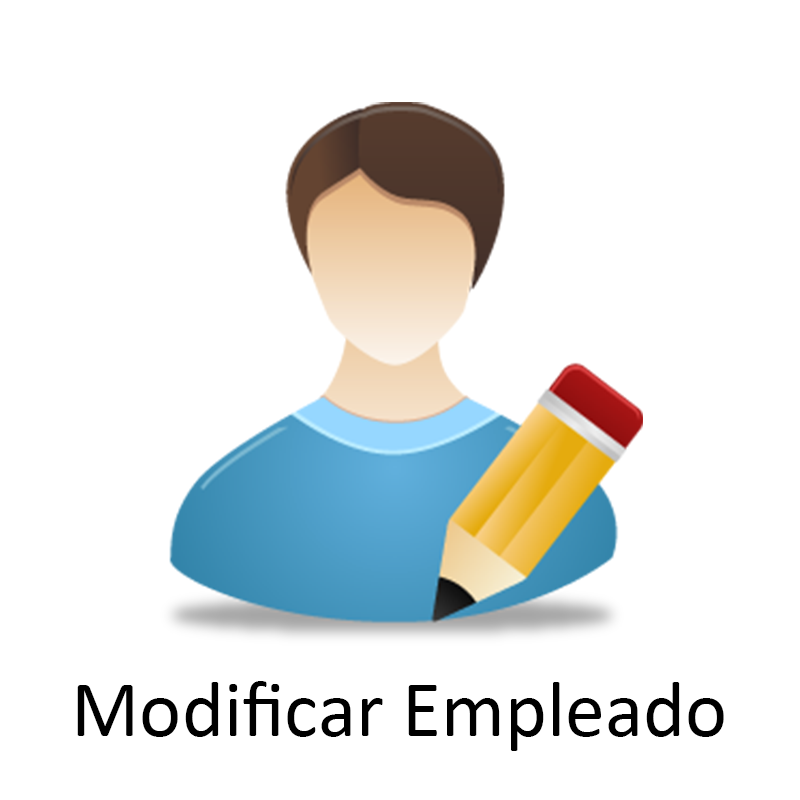
<style>
.page{position:relative;width:800px;height:800px;background:#ffffff}
.page>*{position:absolute;margin:0}
.t1{font:80px "Calibri";color:#000000}
</style>
<div class="page">
<p class="t1" style="left:77px;top:681px;width:647px;height:70px">Modificar Empleado</p>
</div>
